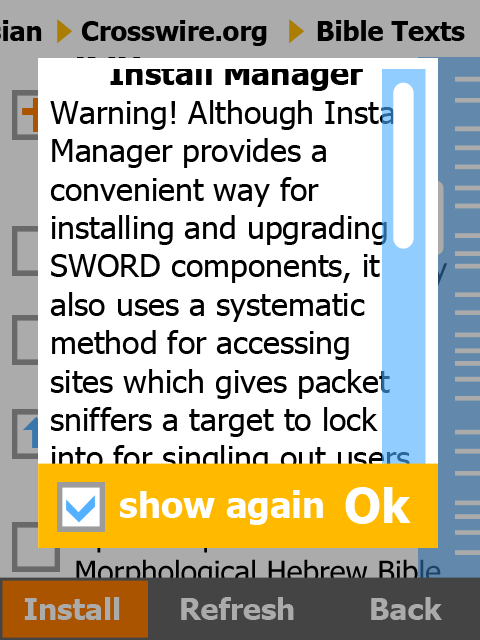
<style>
.page{position:relative;width:480px;height:640px;background:#ffffff}
.page>*{position:absolute;margin:0}
.t1{font:26.8px "Tahoma-Bold";color:#000000}
.t2{font:32px "Tahoma";color:#000000}
.t3{font:32px "Tahoma-Bold";color:#000000}
.t4{font:36px "Tahoma-Bold";color:#ffffff}
.t5{font:48px "Tahoma-Bold";color:#ffffff}
.t6{font:30px "Tahoma-Bold";color:#ababab}
</style>
<div class="page">
<p class="t1" style="left:81px;top:20px;width:186px;height:26px">Crosswire.org</p>
<p class="t1" style="left:317px;top:20px;width:148px;height:21px">Bible Texts</p>
<p class="t2" style="left:50px;top:61px;width:367px;height:414px;text-align:center"><span class="t3">Install Manager</span><br>Warning! Although Install Manager provides a convenient way for installing and upgrading SWORD components, it also uses a systematic method for accessing sites which gives packet sniffers a target to lock into for singling out users.</p>
<p class="t4" style="left:120px;top:490px;width:203px;height:35px">show again</p>
<p class="t5" style="left:345px;top:487px;width:66px;height:37px">Ok</p>
<p class="t6" style="left:24px;top:597px;width:96px;height:23px">Install</p>
<p class="t6" style="left:181px;top:597px;width:113px;height:23px">Refresh</p>
<p class="t6" style="left:371px;top:597px;width:71px;height:23px">Back</p>
</div>
